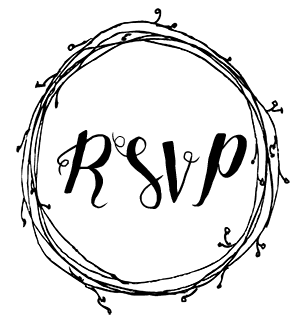
<style>
.page{position:relative;width:300px;height:326px;background:#ffffff}
.page>*{position:absolute;margin:0}
.t1{font:83.3px "LaserMetal";color:#000000}
</style>
<div class="page">
<p class="t1" style="left:57px;top:130px;width:190px;height:79px">RSVP</p>
</div>
